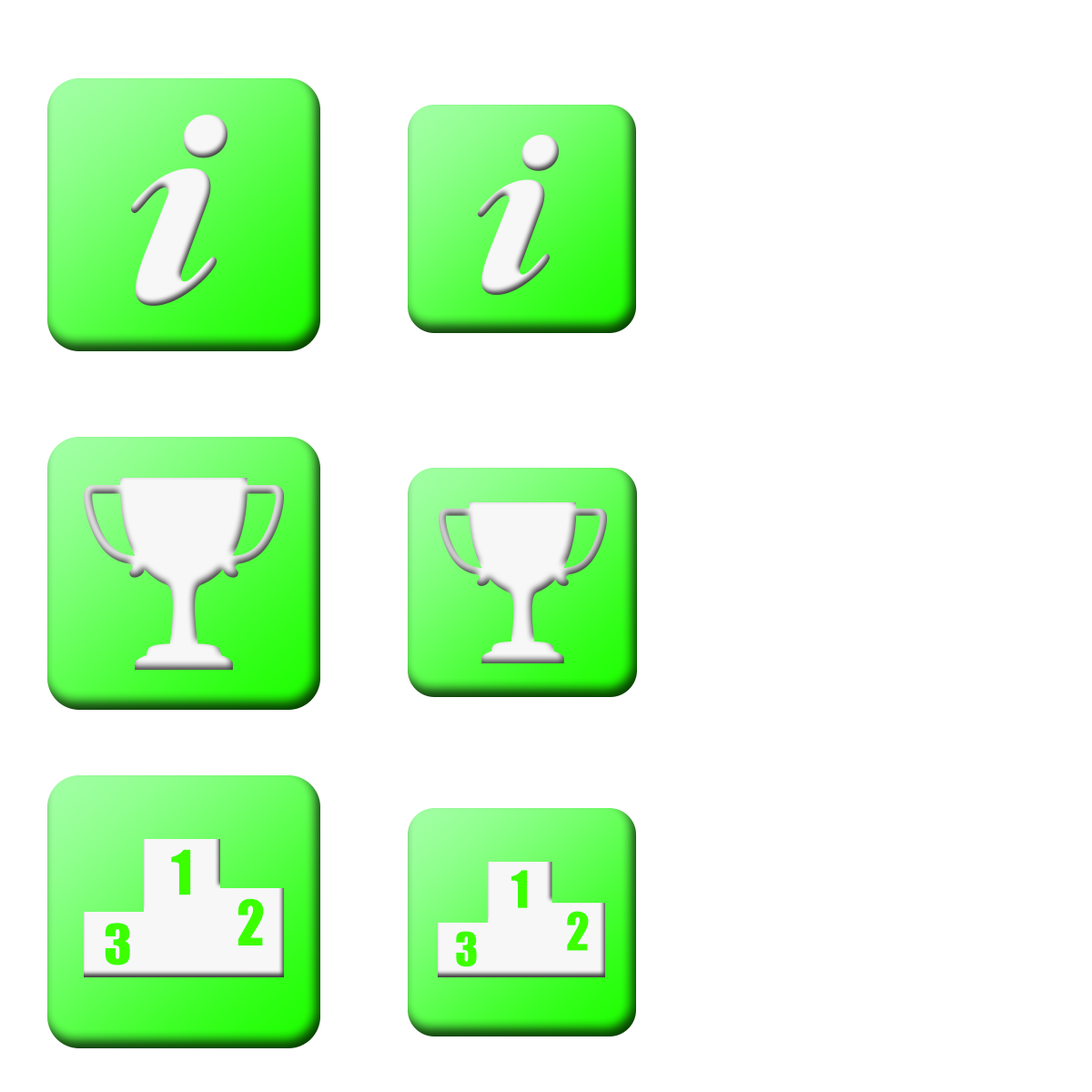
<style>
.page{position:relative;width:1092px;height:1092px;background:#ffffff}
.page>*{position:absolute;margin:0}
.t1{font:57.2px "Impact";color:#3cff00}
.t2{font:47.8px "Impact";color:#3cff00}
.t3{font:57.9px "Impact";color:#3cff00;scale:0.97 1}
.t4{font:48.4px "Impact";color:#3cff00;scale:0.97 1}
.t5{font:51.2px "Impact";color:#3cff00;scale:1.03 1}
.t6{font:42.9px "Impact";color:#3cff00;scale:1.03 1}
</style>
<div class="page">
<p class="t1" style="left:171px;top:849px;width:20px;height:46px">1</p>
<p class="t2" style="left:511px;top:870px;width:17px;height:38px">1</p>
<p class="t3" style="left:238px;top:898px;width:26px;height:47px">2</p>
<p class="t4" style="left:567px;top:911px;width:22px;height:40px">2</p>
<p class="t5" style="left:105px;top:923px;width:25px;height:42px">3</p>
<p class="t6" style="left:456px;top:931px;width:21px;height:36px">3</p>
</div>
